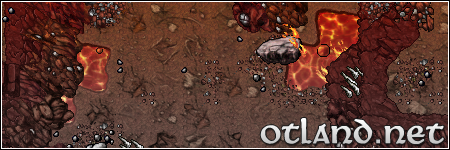
<style>
.page{position:relative;width:450px;height:150px}
.page>*{position:absolute;margin:0}
.t1{font:36px "Martel";color:#d8d8d8;font-weight:bold}
.t2{font:36px "ArialMT";color:#d8d8d8;font-weight:bold}
</style>
<div class="page">
<p class="t1" style="left:260px;top:118px;width:184px;height:26px">otland<span class="t2">.</span>net</p>
</div>
